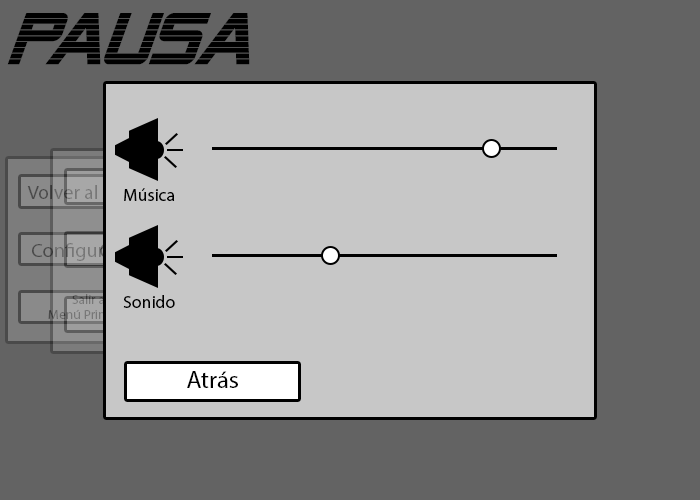
<style>
.page{position:relative;width:700px;height:500px;background:#636363}
.page>*{position:absolute;margin:0}
.t1{font:72.4px "AlienEncountersBoldItalic";color:#000000}
.t2{font:17.7px "MyriadPro-Regular";color:#000000}
.t3{font:24px "MyriadPro-Regular";color:#000000}
</style>
<div class="page">
<p class="t1" style="left:7px;top:13px;width:243px;height:52px">PAUSA</p>
<p class="t2" style="left:124px;top:188px;width:51px;height:13px">Música</p>
<p class="t2" style="left:123px;top:295px;width:52px;height:13px">Sonido</p>
<p class="t3" style="left:187px;top:371px;width:51px;height:17px">Atrás</p>
</div>
